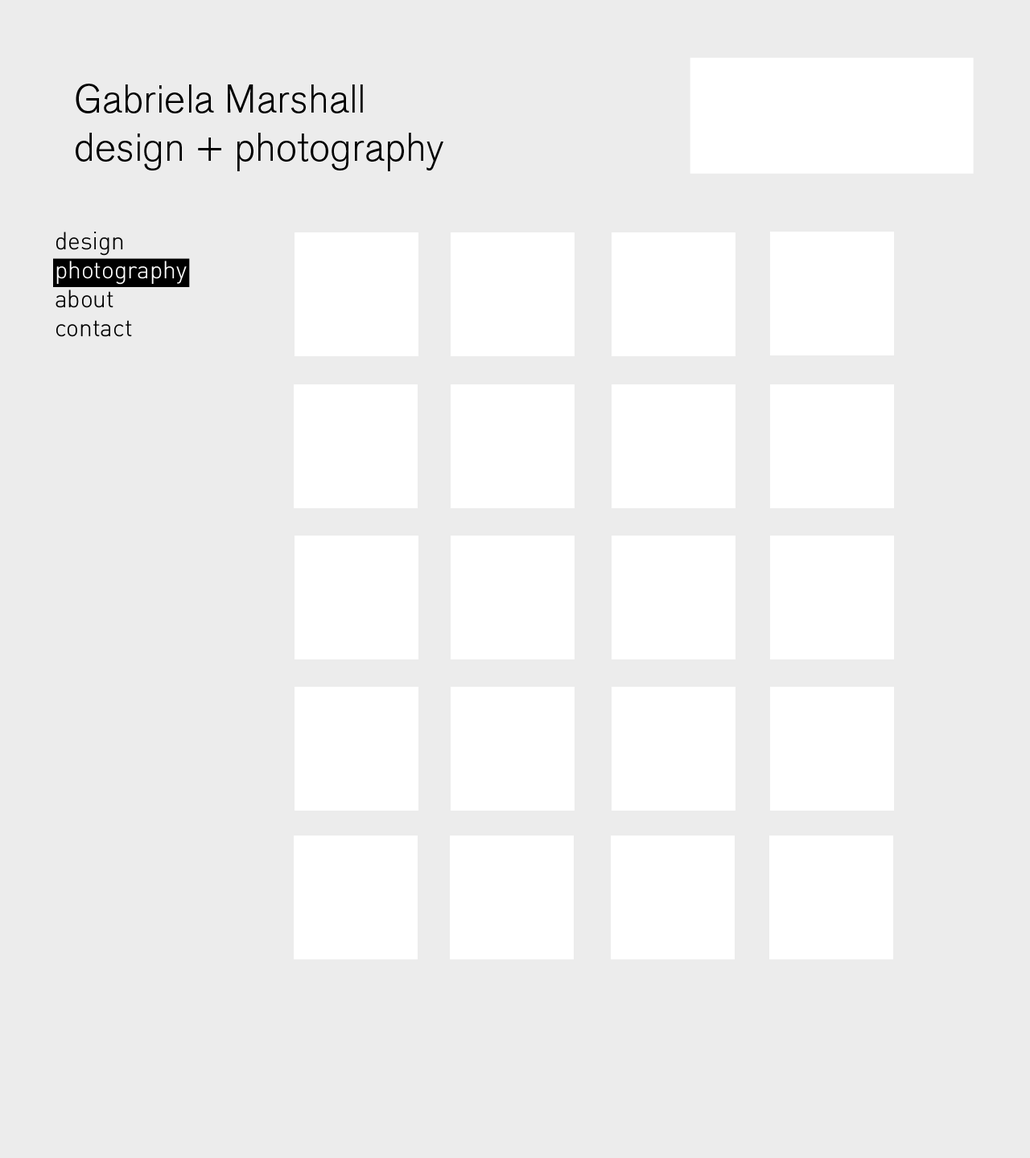
<style>
.page{position:relative;width:1030px;height:1158px;background:#ececec}
.page>*{position:absolute;margin:0}
.t1{font:40.2px "AkzidenzGroteskBE-LightOsF";color:#000000}
</style>
<div class="page">
<p class="t1" style="left:76px;top:84px;width:367px;height:87px">Gabriela Marshall<br>design + photography</p>
</div>
